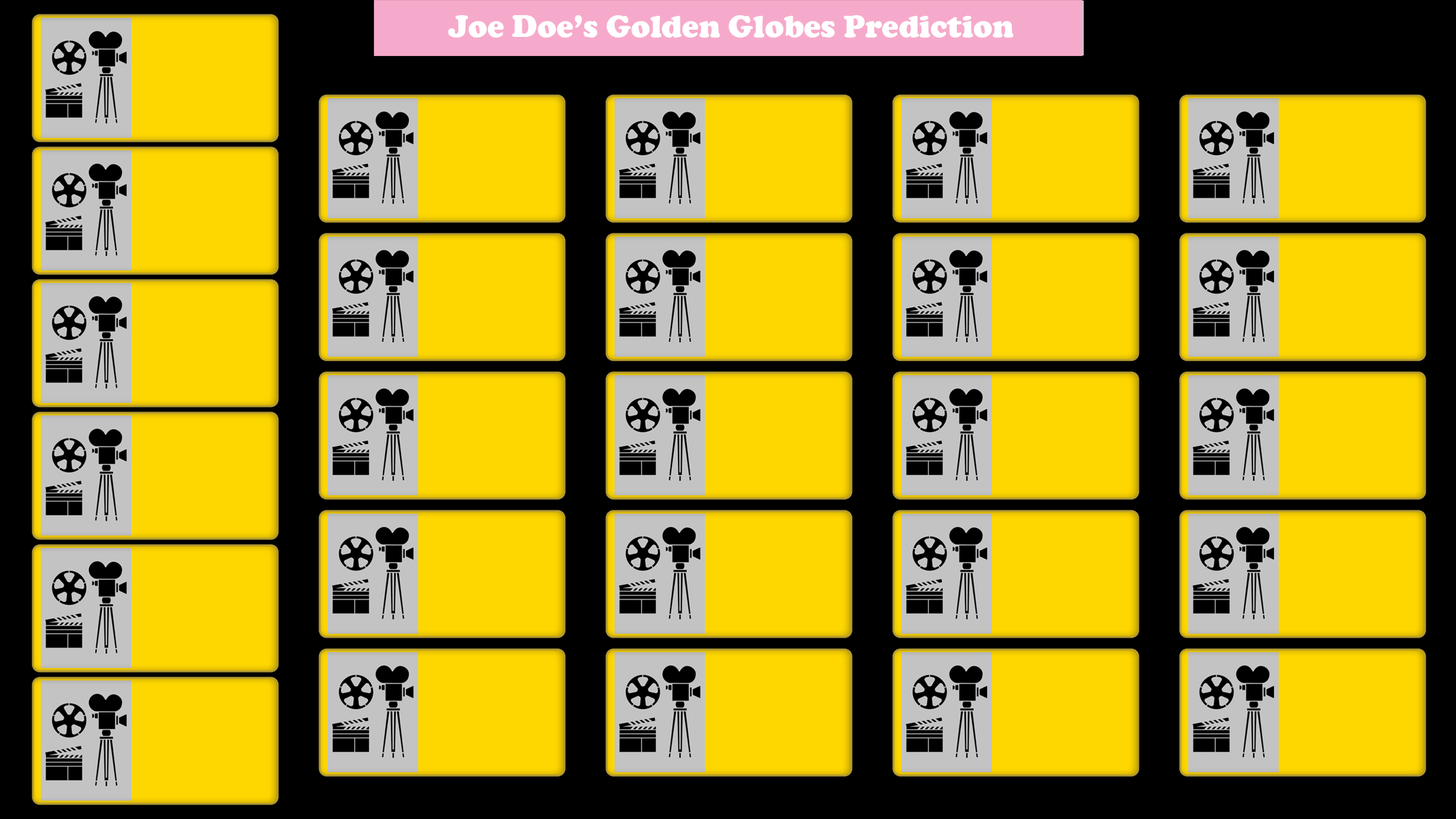
<style>
.page{position:relative;width:1456px;height:819px;background:#ffd700}
.page>*{position:absolute;margin:0}
.t1{font:31.7px "CooperBlack";color:#ffffff}
</style>
<div class="page">
<p class="t1" style="left:448px;top:15px;width:566px;height:23px">Joe Doe’s Golden Globes Prediction</p>
</div>
